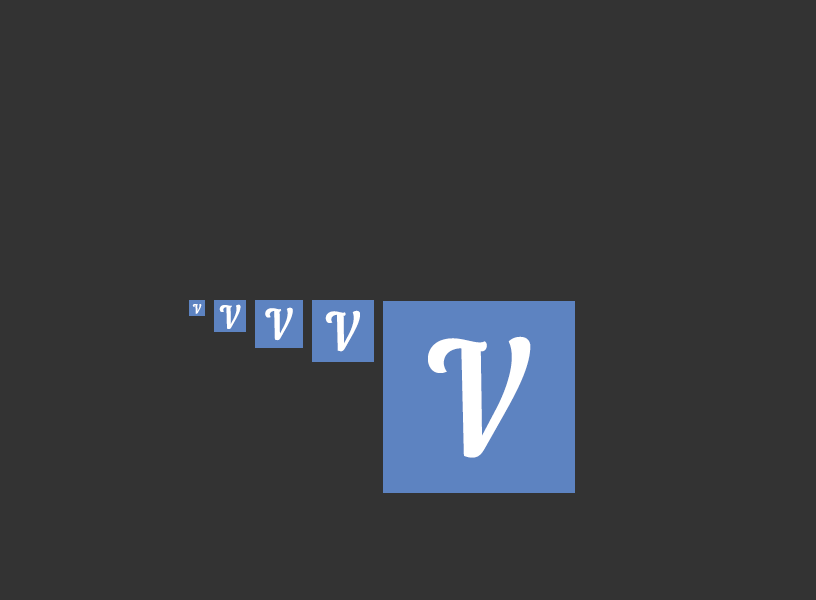
<style>
.page{position:relative;width:816px;height:600px;background:#333333}
.page>*{position:absolute;margin:0}
.t1{font:12px "NautilusPompilius";letter-spacing:0.05em;color:#ffffff}
.t2{font:30px "NautilusPompilius";letter-spacing:0.05em;color:#ffffff}
.t3{font:40px "NautilusPompilius";letter-spacing:0.05em;color:#ffffff}
.t4{font:50px "NautilusPompilius";letter-spacing:0.05em;color:#ffffff}
.t5{font:150px "NautilusPompilius";letter-spacing:0.05em;color:#ffffff}
</style>
<div class="page">
<p class="t1" style="left:192px;top:304px;width:10px;height:10px">V</p>
<p class="t2" style="left:219px;top:304px;width:22px;height:25px">V</p>
<p class="t3" style="left:265px;top:307px;width:28px;height:34px">V</p>
<p class="t4" style="left:325px;top:310px;width:35px;height:42px">V</p>
<p class="t5" style="left:428px;top:336px;width:103px;height:122px">V</p>
</div>
